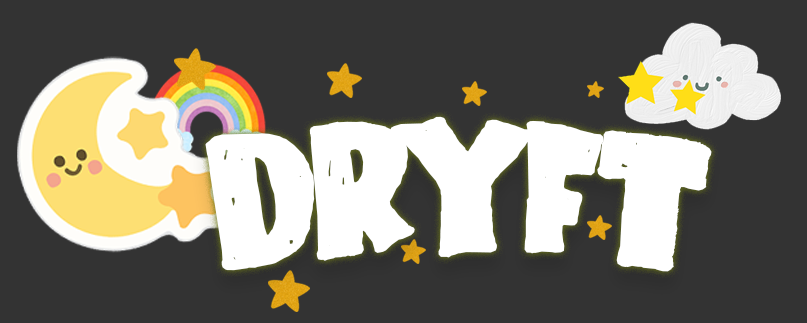
<style>
.page{position:relative;width:807px;height:323px;background:#333333}
.page>*{position:absolute;margin:0}
.t1{font:188.9px "RaincloudsDEMO-Regular";letter-spacing:-0.06em;color:#ffffff;text-transform:uppercase;scale:0.89 1}
</style>
<div class="page">
<p class="t1" style="left:205px;top:116px;width:507px;height:156px">DRYFT</p>
</div>
